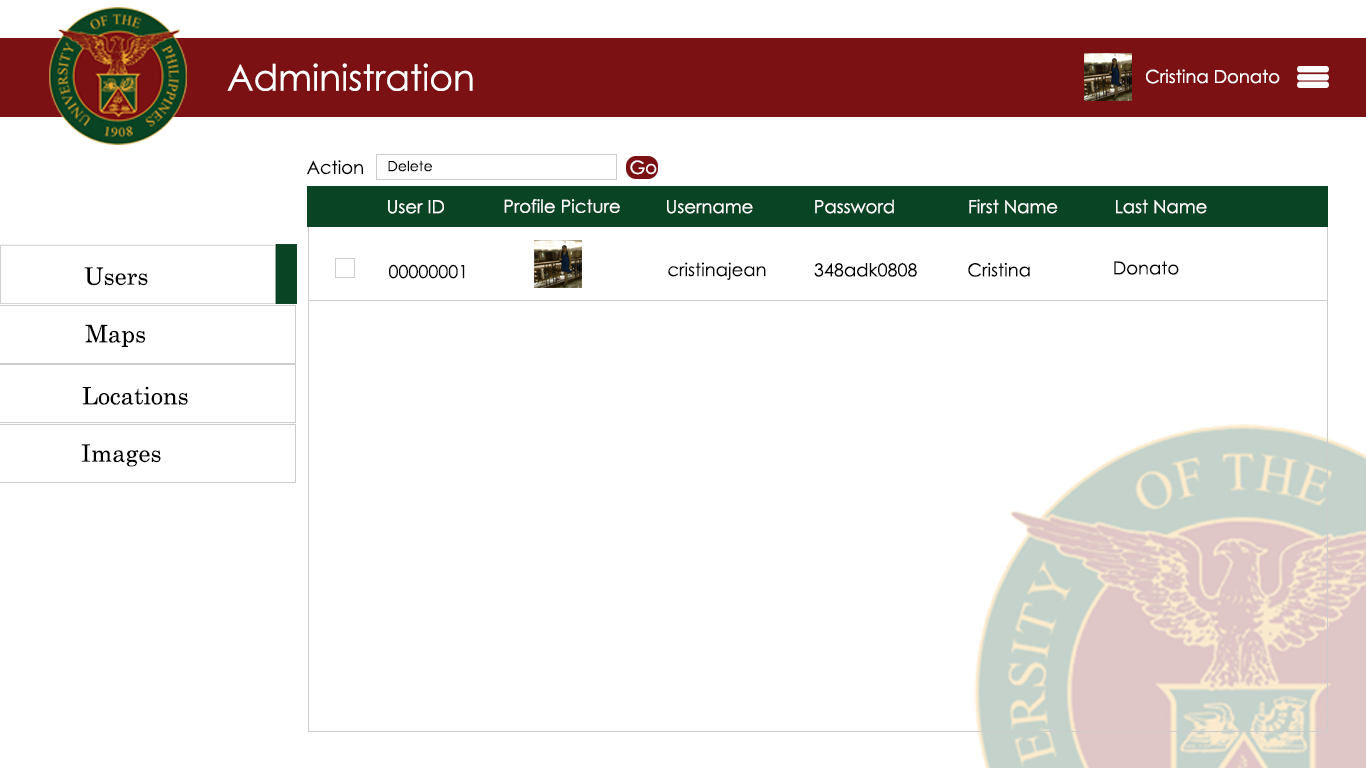
<style>
.page{position:relative;width:1366px;height:768px;background:#ffffff}
.page>*{position:absolute;margin:0}
.t1{font:36px "CenturyGothic";color:#ffffff}
.t2{font:18px "CenturyGothic";color:#ffffff}
.t3{font:18px "CenturyGothic";color:#000000}
.t4{font:14px "CenturyGothic";color:#000000}
.t5{font:24px "CenturySchoolbook";color:#000000}
</style>
<div class="page">
<p class="t1" style="left:227px;top:63px;width:246px;height:28px">Administration</p>
<p class="t2" style="left:1146px;top:69px;width:134px;height:15px">Cristina Donato</p>
<p class="t3" style="left:307px;top:160px;width:56px;height:15px">Action</p>
<p class="t4" style="left:388px;top:160px;width:44px;height:12px">Delete</p>
<p class="t2" style="left:630px;top:160px;width:27px;height:15px">Go</p>
<p class="t2" style="left:388px;top:200px;width:56px;height:14px">User ID</p>
<p class="t2" style="left:504px;top:199px;width:116px;height:14px">Profile Picture</p>
<p class="t2" style="left:667px;top:200px;width:86px;height:14px">Username</p>
<p class="t2" style="left:815px;top:199px;width:79px;height:15px">Password</p>
<p class="t2" style="left:969px;top:199px;width:89px;height:15px">First Name</p>
<p class="t2" style="left:1116px;top:199px;width:91px;height:15px">Last Name</p>
<p class="t5" style="left:84px;top:267px;width:64px;height:19px">Users</p>
<p class="t3" style="left:389px;top:264px;width:76px;height:15px">00000001</p>
<p class="t3" style="left:668px;top:262px;width:98px;height:18px">cristinajean</p>
<p class="t3" style="left:814px;top:263px;width:103px;height:14px">348adk0808</p>
<p class="t3" style="left:968px;top:262px;width:62px;height:15px">Cristina</p>
<p class="t3" style="left:1114px;top:261px;width:65px;height:14px">Donato</p>
<p class="t5" style="left:85px;top:324px;width:61px;height:23px">Maps</p>
<p class="t5" style="left:82px;top:386px;width:106px;height:19px">Locations</p>
<p class="t5" style="left:81px;top:444px;width:80px;height:23px">Images</p>
</div>
